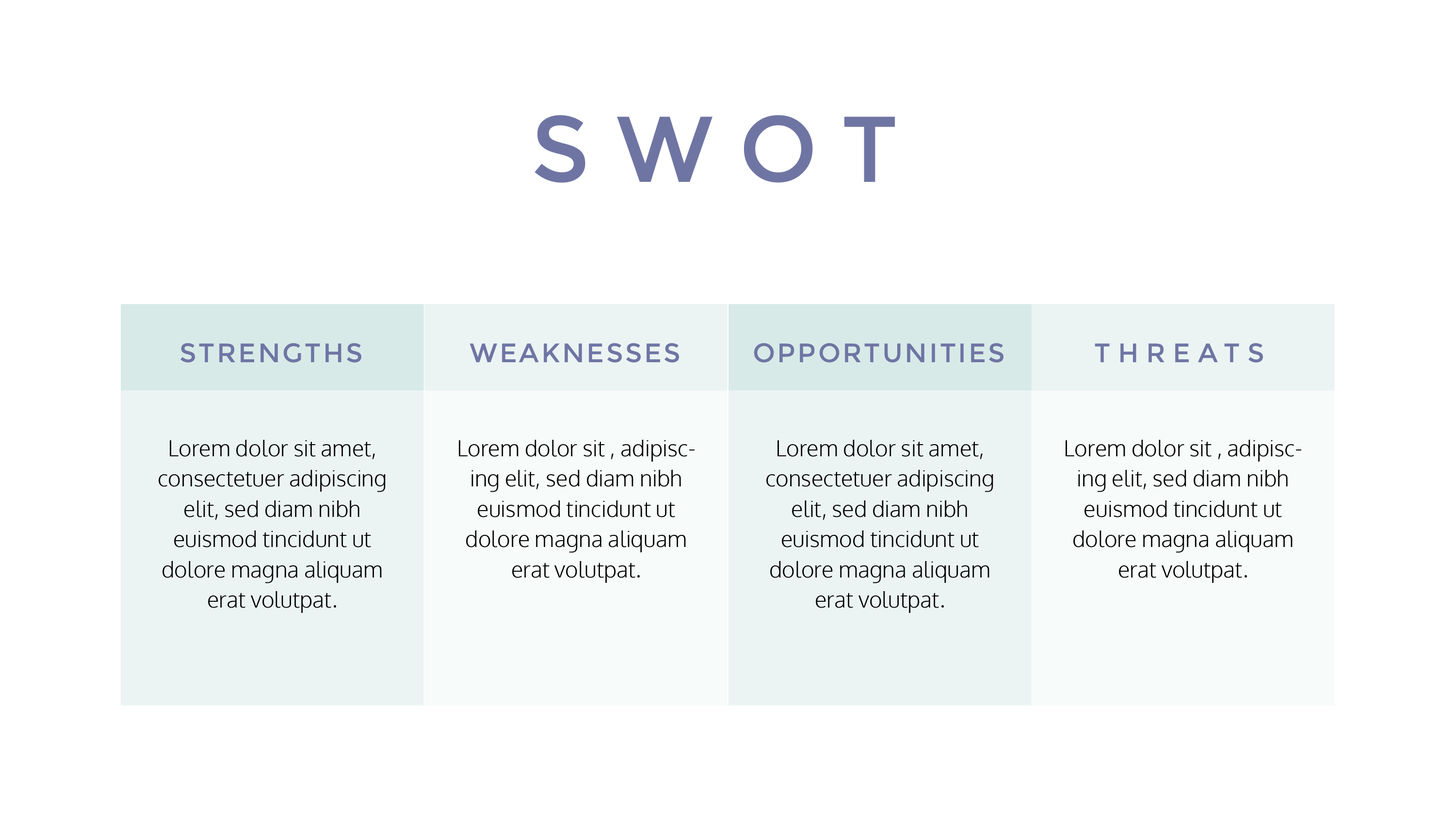
<style>
.page{position:relative;width:1455px;height:819px;background:#ffffff}
.page>*{position:absolute;margin:0}
.t1{font:93.2px "Montserrat-Regular";letter-spacing:0.28em;color:#6f75a3}
.t2{font:26.7px "Montserrat-Regular";letter-spacing:0.08em;color:#6f75a3}
.t3{font:26.7px "Montserrat-Regular";letter-spacing:0.28em;color:#6f75a3}
.t4{font:22.2px/30.3px "Oxygen-Light";color:#000000}
</style>
<div class="page">
<p class="t1" style="left:535px;top:115px;width:361px;height:68px">SWOT</p>
<p class="t2" style="left:180px;top:343px;width:181px;height:20px">STRENGTHS</p>
<p class="t2" style="left:470px;top:343px;width:209px;height:20px">WEAKNESSES</p>
<p class="t2" style="left:754px;top:343px;width:250px;height:20px">OPPORTUNITIES</p>
<p class="t3" style="left:1095px;top:343px;width:168px;height:20px">THREATS</p>
<p class="t4" style="left:159px;top:440px;width:227px;height:173px;text-align:center">Lorem dolor sit amet, consectetuer adipiscing elit, sed diam nibh euismod tincidunt ut dolore magna aliquam erat volutpat.</p>
<p class="t4" style="left:459px;top:440px;width:236px;height:143px;text-align:center">Lorem dolor sit , adipiscing elit, sed diam nibh euismod tincidunt ut dolore magna aliquam erat volutpat.</p>
<p class="t4" style="left:766px;top:440px;width:228px;height:173px;text-align:center">Lorem dolor sit amet, consectetuer adipiscing elit, sed diam nibh euismod tincidunt ut dolore magna aliquam erat volutpat.</p>
<p class="t4" style="left:1066px;top:440px;width:236px;height:143px;text-align:center">Lorem dolor sit , adipiscing elit, sed diam nibh euismod tincidunt ut dolore magna aliquam erat volutpat.</p>
</div>
